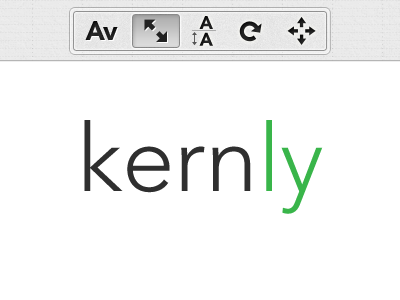
<style>
.page{position:relative;width:400px;height:300px;background:#ffffff}
.page>*{position:absolute;margin:0}
.t1{font:18.3px/16.8px "AvenirLTStd-Black";color:#1b1b1b}
.t2{font:26.2px "AvenirLTStd-Black";color:#333333}
.t3{font:93.9px "AvenirLTStd-Light";color:#2f2f2f}
.t4{font:93.9px "AvenirLTStd-Light";color:#39b54a}
</style>
<div class="page">
<p class="t1" style="left:199px;top:16px;width:14px;height:30px">A<br>A</p>
<p class="t2" style="left:85px;top:21px;width:33px;height:19px">Av</p>
<p class="t3" style="left:84px;top:120px;width:239px;height:94px">kern<span class="t4">ly</span></p>
</div>
